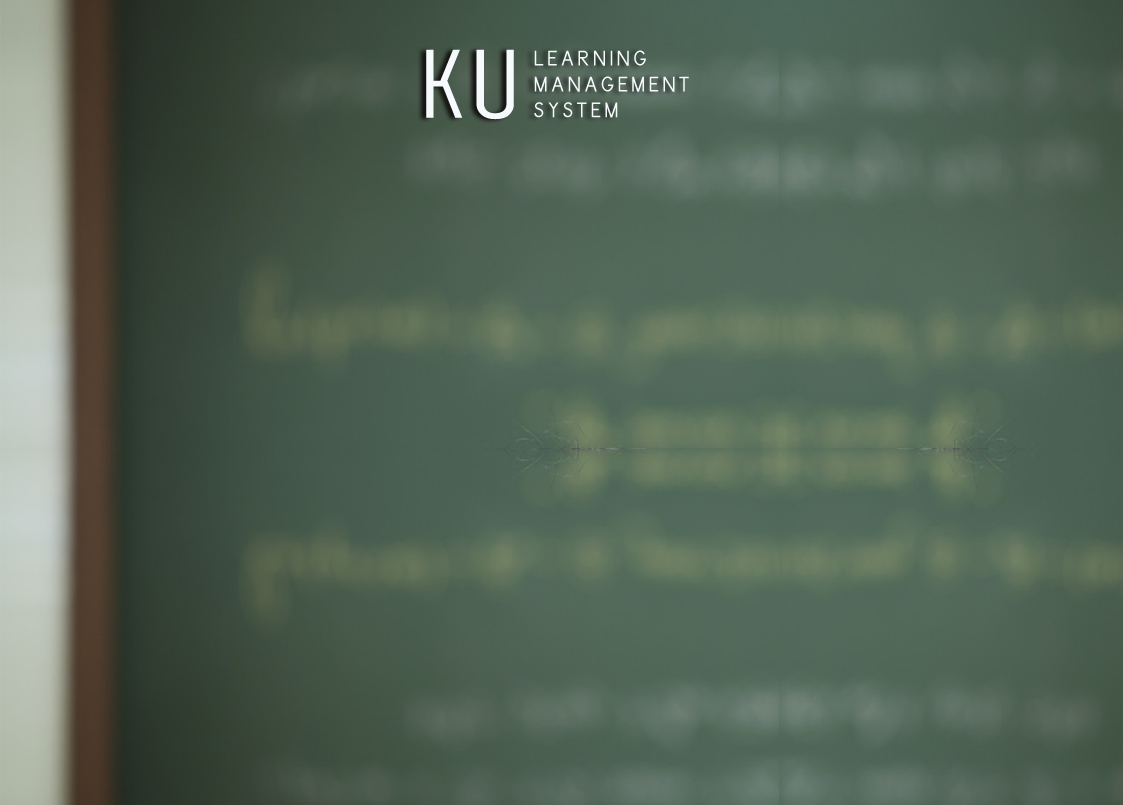
<style>
.page{position:relative;width:1123px;height:805px}
.page>*{position:absolute;margin:0}
.t1{font:106px "WaskNew";color:#f6fafd;scale:1.26 1}
.t2{font:21.6px "Simpleregular";color:#f6fafd}
</style>
<div class="page">
<p class="t1" style="left:426px;top:49px;width:88px;height:71px">KU</p>
<p class="t2" style="left:534px;top:50px;width:155px;height:68px">L E A R N I N G   <br>M A N A G E M E N T  <br>S Y S T E M</p>
</div>
